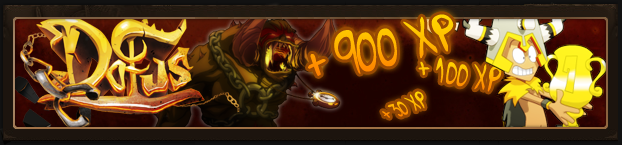
<style>
.page{position:relative;width:622px;height:145px}
.page>*{position:absolute;margin:0}
.t1{font:47.4px "GoBoom!";color:#ffb400;scale:0.8 1}
.t2{font:31.6px "GoBoom!";color:#ffb400;scale:0.8 1}
.t3{font:19.8px "GoBoom!";color:#ffb400;scale:0.8 1}
</style>
<div class="page">
<p class="t1" style="left:308px;top:14px;width:146px;height:62px;rotate:-14deg">+ 900 XP</p>
<p class="t2" style="left:418px;top:57px;width:84px;height:35px;rotate:5deg">+ 100 XP</p>
<p class="t3" style="left:382px;top:91px;width:43px;height:27px;rotate:-26deg">+ 30 XP</p>
</div>
